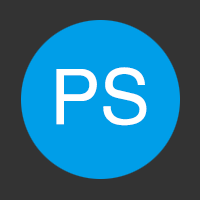
<style>
.page{position:relative;width:200px;height:200px;background:#333333}
.page>*{position:absolute;margin:0}
.t1{font:77.2px "FZHTJW--GB1-0";color:#ffffff}
</style>
<div class="page">
<p class="t1" style="left:56px;top:67px;width:91px;height:59px">PS</p>
</div>
